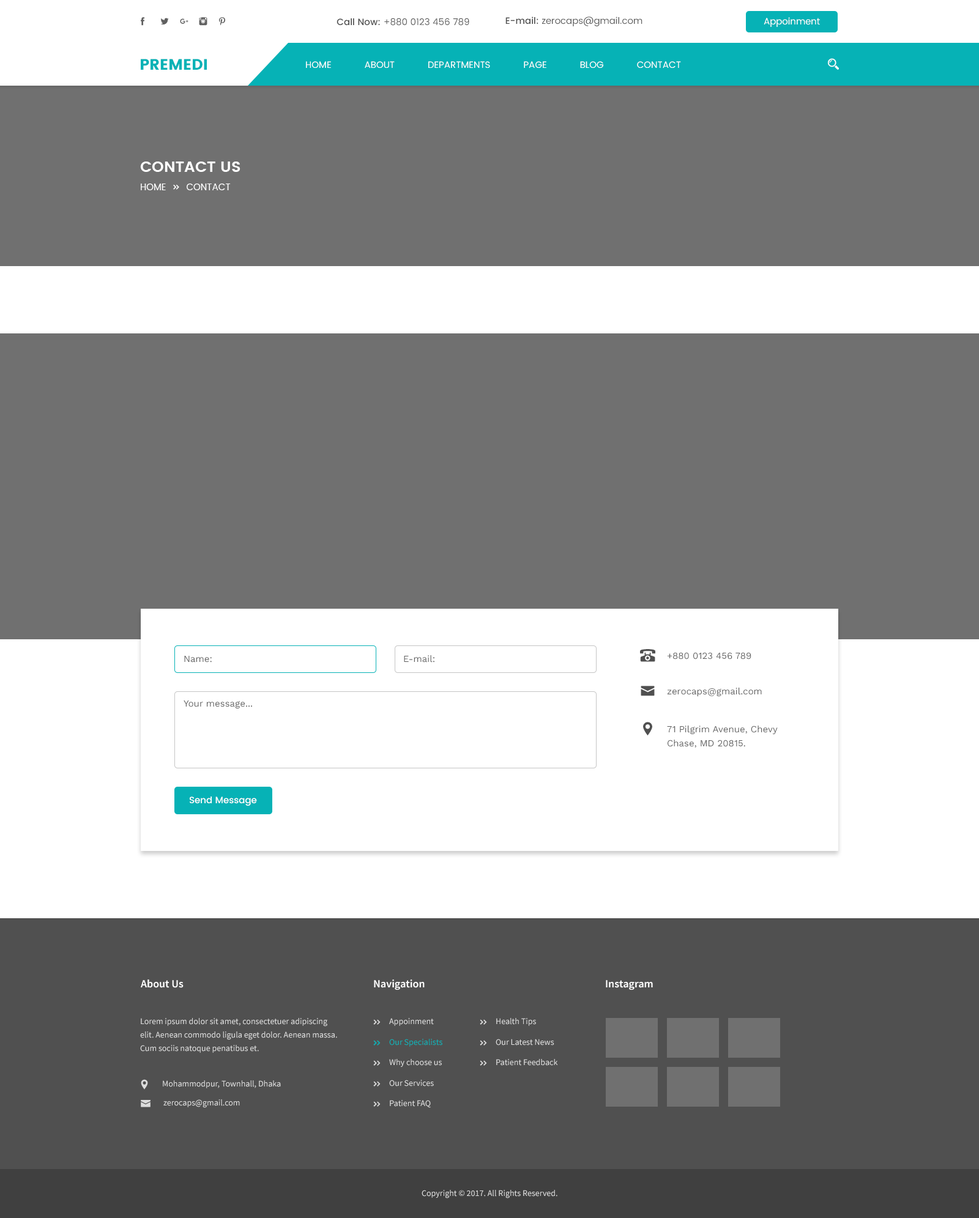
<style>
.page{position:relative;width:979px;height:1218px;background:#707070}
.page>*{position:absolute;margin:0}
.t1{font:9.2px "Poppins-Regular";color:#606060}
.t2{font:9.2px "Poppins-Medium";color:#505050}
.t3{font:9.2px "Poppins-Regular";color:#fffefe}
.t4{font:15.3px "Poppins";color:#06b2b6}
.t5{font:9.2px "Poppins-Regular";color:#ffffff}
.t6{font:15.3px "Poppins-SemiBold";color:#ffffff}
.t7{font:9.2px "WorkSans-Regular";color:#606060}
.t8{font:9.2px/14.1px "WorkSans-Regular";color:#606060}
.t9{font:9.2px "Poppins-Medium";color:#ffffff}
.t10{font:11px "SourceSansPro-Semibold";color:#ffffff}
.t11{font:8.6px/13.5px "SourceSansPro-Regular";color:#dddddd}
.t12{font:8.6px "SourceSansPro-Regular";color:#dddddd}
.t13{font:8.6px "SourceSansPro-Regular";color:#06b2b6}
</style>
<div class="page">
<p class="t1" style="left:336px;top:18px;width:133px;height:8px"><span class="t2">Call Now: </span>+880 0123 456 789</p>
<p class="t1" style="left:505px;top:17px;width:137px;height:9px"><span class="t2">E-mail: </span>zerocaps@gmail.com</p>
<p class="t3" style="left:764px;top:17px;width:56px;height:10px">Appoinment</p>
<p class="t4" style="left:141px;top:59px;width:66px;height:11px">PREMEDI</p>
<p class="t5" style="left:306px;top:61px;width:375px;height:7px">HOME            ABOUT            DEPARTMENTS            PAGE            BLOG            CONTACT</p>
<p class="t6" style="left:140px;top:162px;width:100px;height:10px">CONTACT US</p>
<p class="t7" style="left:667px;top:652px;width:84px;height:8px">+880 0123 456 789</p>
<p class="t7" style="left:184px;top:656px;width:28px;height:7px">Name:</p>
<p class="t7" style="left:404px;top:655px;width:30px;height:8px">E-mail:</p>
<p class="t7" style="left:667px;top:688px;width:95px;height:9px">zerocaps@gmail.com</p>
<p class="t7" style="left:184px;top:701px;width:68px;height:7px">Your message...</p>
<p class="t8" style="left:667px;top:726px;width:111px;height:22px">71 Pilgrim Avenue, Chevy <br>Chase, MD 20815.</p>
<p class="t9" style="left:190px;top:797px;width:67px;height:9px">Send Message</p>
<p class="t10" style="left:141px;top:980px;width:43px;height:8px">About Us</p>
<p class="t10" style="left:374px;top:980px;width:51px;height:10px">Navigation</p>
<p class="t10" style="left:606px;top:980px;width:47px;height:10px">Instagram</p>
<p class="t11" style="left:140px;top:1018px;width:197px;height:35px">Lorem ipsum dolor sit amet, consectetuer adipiscing elit. Aenean commodo ligula eget dolor. Aenean massa. Cum sociis natoque penatibus et.</p>
<p class="t12" style="left:389px;top:1018px;width:45px;height:8px">Appoinment</p>
<p class="t12" style="left:496px;top:1018px;width:40px;height:8px">Health Tips</p>
<p class="t13" style="left:389px;top:1039px;width:53px;height:8px">Our Specialists</p>
<p class="t12" style="left:496px;top:1039px;width:58px;height:7px">Our Latest News</p>
<p class="t12" style="left:389px;top:1059px;width:53px;height:8px">Why choose us</p>
<p class="t12" style="left:496px;top:1059px;width:62px;height:7px">Patient Feedback</p>
<p class="t12" style="left:163px;top:1080px;width:118px;height:8px">Mohammodpur, Townhall, Dhaka</p>
<p class="t12" style="left:389px;top:1080px;width:45px;height:7px">Our Services</p>
<p class="t12" style="left:163px;top:1099px;width:77px;height:9px">zerocaps@gmail.com</p>
<p class="t12" style="left:390px;top:1100px;width:41px;height:8px">Patient FAQ</p>
<p class="t12" style="left:422px;top:1190px;width:135px;height:9px">Copyright © 2017. All Rights Reserved.</p>
</div>
